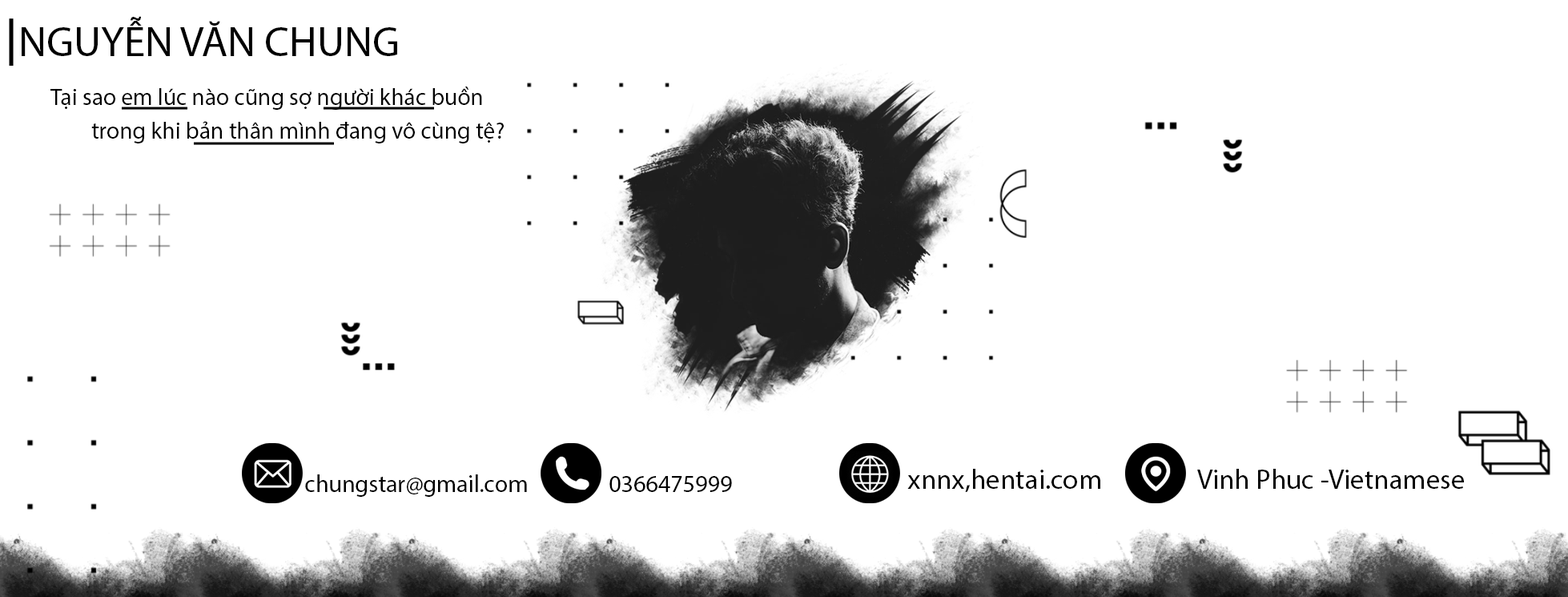
<style>
.page{position:relative;width:1568px;height:597px;background:#ffffff}
.page>*{position:absolute;margin:0}
.t1{font:42.5px "MyriadPro-Regular";color:#000000}
.t2{font:23.6px "MyriadPro-Regular";color:#000000}
.t3{font:28px "MyriadPro-Regular";color:#000000}
.t4{font:24px "MyriadPro-Regular";color:#000000}
</style>
<div class="page">
<p class="t1" style="left:22px;top:16px;width:375px;height:40px">NGUYỄN VĂN CHUNG</p>
<p class="t2" style="left:50px;top:86px;width:432px;height:24px">Tại sao em lúc nào cũng sợ người khác buồn</p>
<p class="t2" style="left:91px;top:121px;width:413px;height:22px">trong khi bản thân mình đang vô cùng tệ?</p>
<p class="t3" style="left:907px;top:468px;width:193px;height:24px">xnnx,hentai.com</p>
<p class="t3" style="left:1197px;top:468px;width:267px;height:20px">Vinh Phuc -Vietnamese</p>
<p class="t4" style="left:305px;top:474px;width:222px;height:23px">chungstar@gmail.com</p>
<p class="t4" style="left:609px;top:476px;width:123px;height:16px">0366475999</p>
</div>
